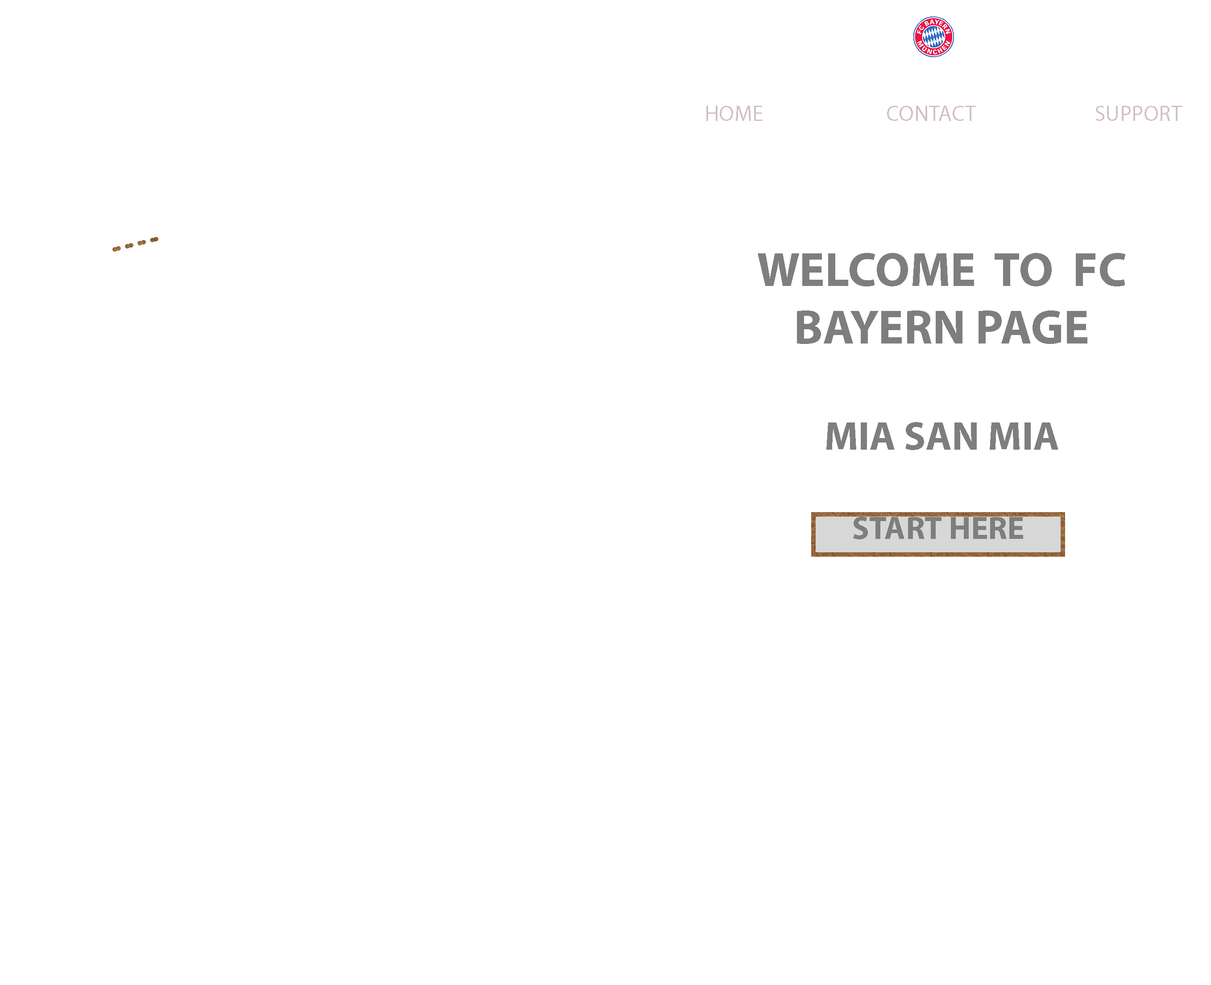
<style>
.page{position:relative;width:1211px;height:985px;background:#ffffff}
.page>*{position:absolute;margin:0}
.t1{font:22.3px "MyriadPro-Regular";color:#d2c1c1}
.t2{font:32.1px "MyriadPro-Regular";color:#d2c1c1}
.t3{font:48.2px "MyriadPro-Bold";color:#7e7e7e}
.t4{font:40.1px "MyriadPro-Bold";color:#7e7e7e}
.t5{font:37px "MyriadPro-Bold";color:#7e7e7e}
.t6{font:32.1px "MyriadPro-Bold";color:#7e7e7e}
</style>
<div class="page">
<p class="t1" style="left:706px;top:106px;width:476px;height:15px"><span class="t2">       </span>HOME                          CONTACT                         SUPPORT</p>
<p class="t3" style="left:757px;top:253px;width:368px;height:286px;text-align:center">WELCOME  TO  FC BAYERN PAGE<br> <br><span class="t4">MIA SAN MIA<br></span><span class="t5"><br>START HERE</span></p>
<p class="t6" style="left:853px;top:517px;width:170px;height:22px">START HERE</p>
</div>
